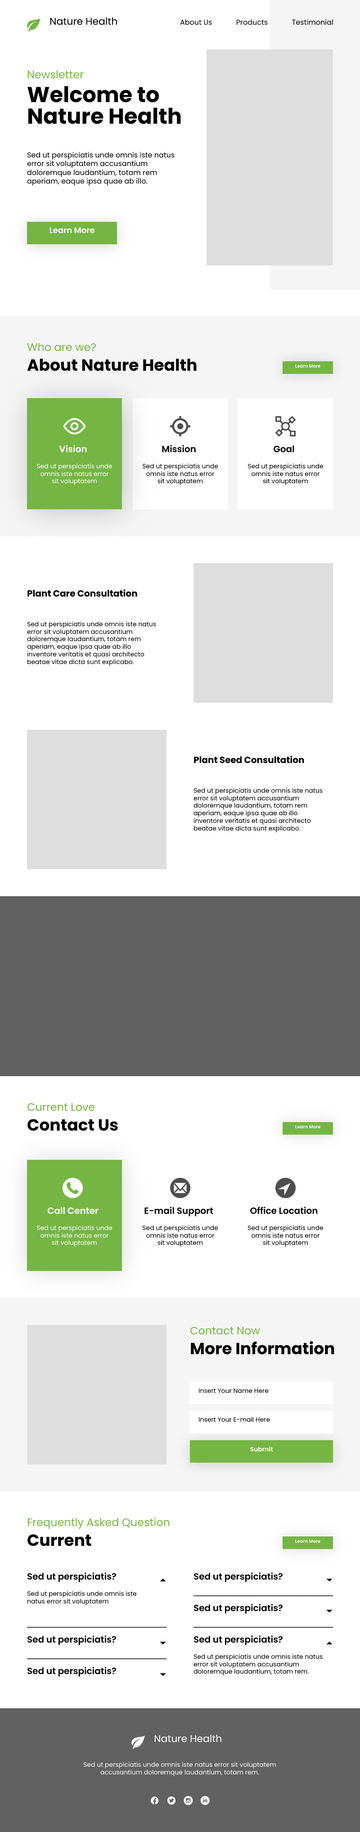
<style>
.page{position:relative;width:360px;height:1832px;background:#ffffff}
.page>*{position:absolute;margin:0}
.t1{font:9.9px "Poppins-Regular";color:#000000}
.t2{font:7.2px "Poppins-Regular";color:#000000}
.t3{font:10.8px "Poppins-Regular";color:#75b544}
.t4{font:21.6px/21.6px "Poppins-Bold";color:#000000}
.t5{font:8.1px "Poppins-SemiBold";color:#ffffff}
.t6{font:16.2px "Poppins-Bold";color:#000000}
.t7{font:4.5px "Poppins-SemiBold";color:#ffffff}
.t8{font:9px "Poppins-SemiBold";color:#ffffff}
.t9{font:9px "Poppins-SemiBold";color:#000000}
.t10{font:6.3px "Poppins-Regular";color:#ffffff}
.t11{font:6.3px "Poppins-Regular";color:#000000}
.t12{font:9px "Poppins-Bold";color:#000000}
.t13{font:6.3px "Poppins-SemiBold";color:#ffffff}
.t14{font:9.9px "Poppins-Regular";color:#ffffff}
</style>
<div class="page">
<p class="t1" style="left:50px;top:17px;width:67px;height:8px">Nature Health</p>
<p class="t2" style="left:180px;top:19px;width:32px;height:6px">About Us</p>
<p class="t2" style="left:237px;top:19px;width:31px;height:6px">Products</p>
<p class="t2" style="left:292px;top:19px;width:41px;height:6px">Testimonial</p>
<p class="t3" style="left:27px;top:70px;width:57px;height:9px">Newsletter</p>
<p class="t4" style="left:27px;top:86px;width:154px;height:38px">Welcome to<br>Nature Health</p>
<p class="t2" style="left:27px;top:152px;width:148px;height:34px">Sed ut perspiciatis unde omnis iste natus error sit voluptatem accusantium doloremque laudantium, totam rem aperiam, eaque ipsa quae ab illo.</p>
<p class="t5" style="left:50px;top:227px;width:44px;height:7px">Learn More</p>
<p class="t3" style="left:27px;top:343px;width:69px;height:8px">Who are we?</p>
<p class="t6" style="left:27px;top:359px;width:170px;height:12px">About Nature Health</p>
<p class="t7" style="left:295px;top:364px;width:25px;height:4px">Learn More</p>
<p class="t8" style="left:59px;top:445px;width:28px;height:8px">Vision</p>
<p class="t9" style="left:162px;top:445px;width:34px;height:8px">Mission</p>
<p class="t9" style="left:274px;top:446px;width:20px;height:7px">Goal</p>
<p class="t10" style="left:37px;top:464px;width:75px;height:21px;text-align:center">Sed ut perspiciatis unde omnis iste natus error sit voluptatem</p>
<p class="t11" style="left:143px;top:464px;width:75px;height:21px;text-align:center">Sed ut perspiciatis unde omnis iste natus error sit voluptatem</p>
<p class="t11" style="left:248px;top:464px;width:76px;height:21px;text-align:center">Sed ut perspiciatis unde omnis iste natus error sit voluptatem</p>
<p class="t12" style="left:27px;top:589px;width:110px;height:8px">Plant Care Consultation</p>
<p class="t11" style="left:27px;top:621px;width:129px;height:45px">Sed ut perspiciatis unde omnis iste natus error sit voluptatem accusantium doloremque laudantium, totam rem aperiam, eaque ipsa quae ab illo inventore veritatis et quasi architecto beatae vitae dicta sunt explicabo.</p>
<p class="t12" style="left:194px;top:756px;width:110px;height:8px">Plant Seed Consultation</p>
<p class="t11" style="left:194px;top:788px;width:129px;height:44px">Sed ut perspiciatis unde omnis iste natus error sit voluptatem accusantium doloremque laudantium, totam rem aperiam, eaque ipsa quae ab illo inventore veritatis et quasi architecto beatae vitae dicta sunt explicabo.</p>
<p class="t3" style="left:27px;top:1103px;width:68px;height:9px">Current Love</p>
<p class="t6" style="left:27px;top:1119px;width:91px;height:12px">Contact Us</p>
<p class="t7" style="left:295px;top:1125px;width:25px;height:4px">Learn More</p>
<p class="t8" style="left:47px;top:1207px;width:52px;height:8px">Call Center</p>
<p class="t9" style="left:144px;top:1207px;width:69px;height:10px">E-mail Support</p>
<p class="t9" style="left:250px;top:1207px;width:68px;height:8px">Office Location</p>
<p class="t10" style="left:37px;top:1225px;width:75px;height:22px;text-align:center">Sed ut perspiciatis unde omnis iste natus error sit voluptatem</p>
<p class="t11" style="left:143px;top:1225px;width:75px;height:22px;text-align:center">Sed ut perspiciatis unde omnis iste natus error sit voluptatem</p>
<p class="t11" style="left:248px;top:1225px;width:76px;height:22px;text-align:center">Sed ut perspiciatis unde omnis iste natus error sit voluptatem</p>
<p class="t3" style="left:190px;top:1327px;width:70px;height:8px">Contact Now</p>
<p class="t6" style="left:191px;top:1341px;width:143px;height:14px">More Information</p>
<p class="t11" style="left:199px;top:1389px;width:70px;height:5px">Insert Your Name Here</p>
<p class="t11" style="left:199px;top:1417px;width:71px;height:5px">Insert Your E-mail Here</p>
<p class="t13" style="left:250px;top:1447px;width:23px;height:5px">Submit</p>
<p class="t3" style="left:27px;top:1518px;width:143px;height:12px">Frequently Asked Question</p>
<p class="t6" style="left:27px;top:1534px;width:64px;height:13px">Current Love</p>
<p class="t7" style="left:295px;top:1540px;width:25px;height:4px">Learn More</p>
<p class="t9" style="left:27px;top:1573px;width:89px;height:10px">Sed ut perspiciatis?</p>
<p class="t9" style="left:194px;top:1573px;width:89px;height:10px">Sed ut perspiciatis?</p>
<p class="t11" style="left:27px;top:1591px;width:110px;height:15px">Sed ut perspiciatis unde omnis iste natus error sit voluptatem</p>
<p class="t9" style="left:194px;top:1604px;width:89px;height:10px">Sed ut perspiciatis?</p>
<p class="t9" style="left:27px;top:1636px;width:89px;height:10px">Sed ut perspiciatis?</p>
<p class="t9" style="left:194px;top:1636px;width:89px;height:10px">Sed ut perspiciatis?</p>
<p class="t11" style="left:194px;top:1654px;width:129px;height:22px">Sed ut perspiciatis unde omnis iste natus error sit voluptatem accusantium doloremque laudantium, totam rem.</p>
<p class="t9" style="left:27px;top:1667px;width:89px;height:10px">Sed ut perspiciatis?</p>
<p class="t14" style="left:154px;top:1735px;width:67px;height:8px">Nature Health</p>
<p class="t10" style="left:83px;top:1762px;width:193px;height:15px;text-align:center">Sed ut perspiciatis unde omnis iste natus error sit voluptatem accusantium doloremque laudantium, totam rem.</p>
</div>
